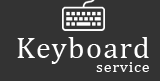
<style>
.page{position:relative;width:160px;height:81px;background:#333333}
.page>*{position:absolute;margin:0}
.t1{font:30px "Cambria";letter-spacing:0.05em;color:#ffffff}
.t2{font:16px "Cambria";letter-spacing:0.05em;color:#ffffff}
</style>
<div class="page">
<p class="t1" style="left:17px;top:37px;width:132px;height:27px">Keyboard</p>
<p class="t2" style="left:96px;top:62px;width:53px;height:10px">service</p>
</div>
